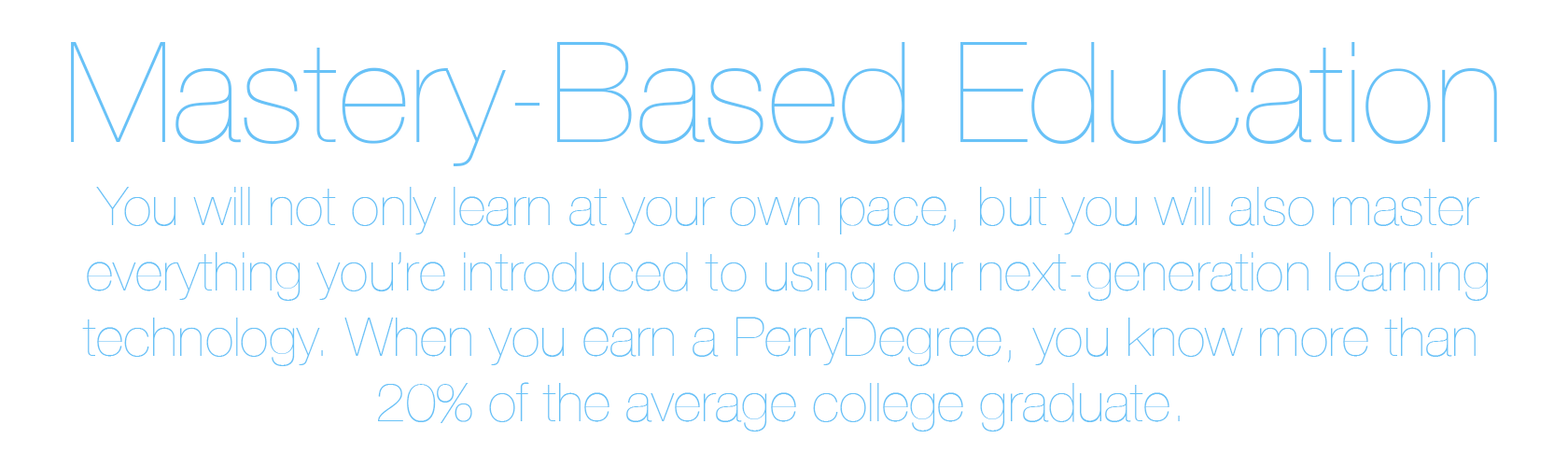
<style>
.page{position:relative;width:1568px;height:467px;background:#ffffff}
.page>*{position:absolute;margin:0}
.t1{font:140px "HelveticaNeue-UltraLight";color:#68c2f7}
.t2{font:54.4px "HelveticaNeue-UltraLight";color:#68c2f7}
</style>
<div class="page">
<p class="t1" style="left:71px;top:41px;width:1426px;height:125px">Mastery-Based Education</p>
<p class="t2" style="left:82px;top:187px;width:1407px;height:244px;text-align:center">You will not only learn at your own pace, but you will also master<br>everything you’re introduced to using our next-generation learning<br>technology. When you earn a PerryDegree, you know more than <br>20% of the average college graduate.</p>
</div>
